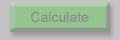
<style>
.page{position:relative;width:120px;height:40px;background:#94c591}
.page>*{position:absolute;margin:0}
.t1{font:14px "ArialMT";color:#8b898b}
</style>
<div class="page">
<p class="t1" style="left:31px;top:11px;width:58px;height:12px">Calculate</p>
</div>
